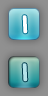
<style>
.page{position:relative;width:48px;height:96px}
.page>*{position:absolute;margin:0}
.t1{font:24px "DFMaruMoji-W9-WING-RKSJ-H";color:#ffffff;font-weight:bold}
.t2{font:24px "DFMaruMoji-W9-WING-RKSJ-H";color:#b5e3e9;font-weight:bold}
</style>
<div class="page">
<p class="t1" style="left:22px;top:15px;width:6px;height:19px">1</p>
<p class="t2" style="left:22px;top:63px;width:6px;height:19px">1</p>
</div>
